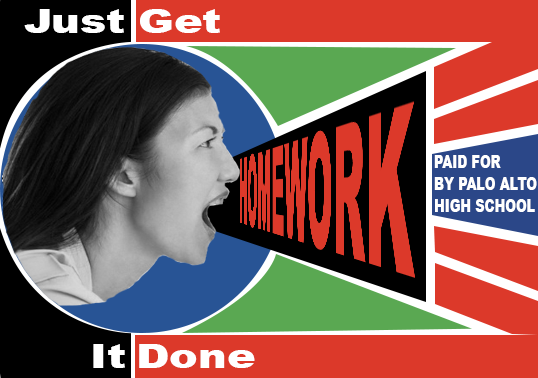
<style>
.page{position:relative;width:538px;height:378px;background:#dc392a}
.page>*{position:absolute;margin:0}
.t1{font:32.5px "Arial-Black";color:#ffffff;scale:1.33 1}
.t2{font:18.4px "Arial-Black";color:#ffffff;scale:0.7 1}
</style>
<div class="page">
<p class="t1" style="left:24px;top:9px;width:100px;height:24px">Just</p>
<p class="t1" style="left:140px;top:9px;width:80px;height:24px">Get</p>
<p class="t2" style="left:434px;top:155px;width:103px;height:57px">PAID FOR <br>BY PALO ALTO<br>HIGH SCHOOL</p>
<p class="t1" style="left:93px;top:344px;width:32px;height:24px">It</p>
<p class="t1" style="left:139px;top:344px;width:116px;height:24px">Done</p>
</div>
